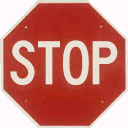
<style>
.page{position:relative;width:128px;height:128px}
.page>*{position:absolute;margin:0}
.t1{font:64px "HighwayGothicNarrow";letter-spacing:-0.015em;color:#e9e1d4}
</style>
<div class="page">
<p class="t1" style="left:10px;top:40px;width:108px;height:45px">STOP</p>
</div>
